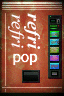
<style>
.page{position:relative;width:64px;height:96px}
.page>*{position:absolute;margin:0}
.t1{font:17.7px/16px "TimesNewRomanPS-BoldItalicMT";color:#ffffff;scale:1.09 1}
.t2{font:17.7px/16px "TimesNewRomanPS-ItalicMT";color:#ffffff;scale:1.09 1}
</style>
<div class="page">
<p class="t1" style="left:8px;top:13px;width:32px;height:36px;text-align:center;rotate:90deg">refri<br><span class="t2">refri</span></p>
</div>
